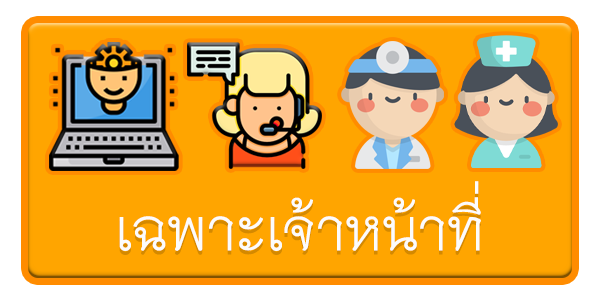
<style>
.page{position:relative;width:600px;height:300px;background:#ffa500}
.page>*{position:absolute;margin:0}
.t1{font:83.3px "THNiramitAS";color:#fcfcfc}
</style>
<div class="page">
<p class="t1" style="left:119px;top:181px;width:362px;height:70px">เฉพาะเจ้าหน้าที่</p>
</div>
